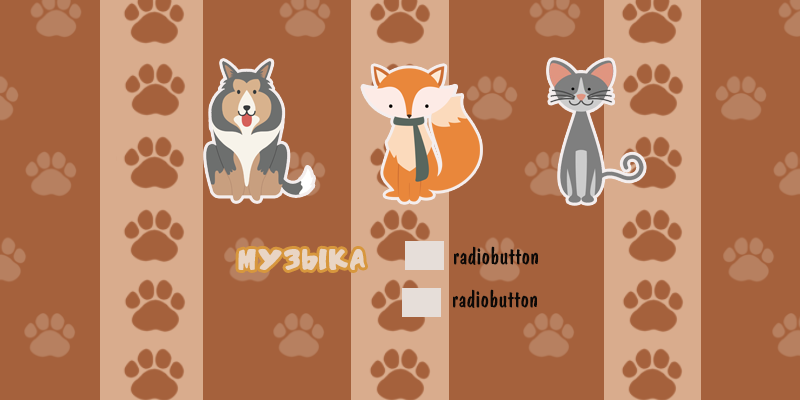
<style>
.page{position:relative;width:800px;height:400px;background:#a5613c}
.page>*{position:absolute;margin:0}
.t1{font:24px "ADomIno";color:#0c0907}
.t2{font:24px "HandSound";color:#e9d5c4}
</style>
<div class="page">
<p class="t1" style="left:454px;top:246px;width:84px;height:19px">radiobutton</p>
<p class="t2" style="left:238px;top:248px;width:127px;height:22px">Музыка</p>
<p class="t1" style="left:453px;top:289px;width:84px;height:19px">radiobutton</p>
</div>
